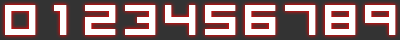
<style>
.page{position:relative;width:400px;height:40px;background:#ffffff}
.page>*{position:absolute;margin:0}
.t1{font:60px "VisitorTT1BRK";color:#ffffff}
</style>
<div class="page">
<p class="t1" style="left:5px;top:5px;width:31px;height:30px">0</p>
<p class="t1" style="left:54px;top:5px;width:13px;height:30px">1</p>
<p class="t1" style="left:85px;top:5px;width:31px;height:30px">2</p>
<p class="t1" style="left:125px;top:5px;width:31px;height:30px">3</p>
<p class="t1" style="left:165px;top:5px;width:31px;height:30px">4</p>
<p class="t1" style="left:205px;top:5px;width:31px;height:30px">5</p>
<p class="t1" style="left:245px;top:5px;width:31px;height:30px">6</p>
<p class="t1" style="left:285px;top:5px;width:31px;height:30px">7</p>
<p class="t1" style="left:325px;top:5px;width:31px;height:30px">8</p>
<p class="t1" style="left:365px;top:5px;width:31px;height:30px">9</p>
</div>
